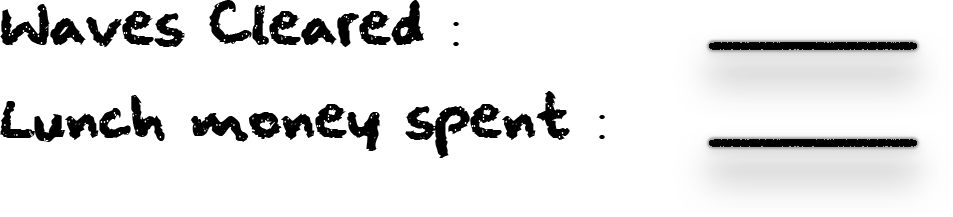
<style>
.page{position:relative;width:953px;height:217px;background:#ffffff}
.page>*{position:absolute;margin:0}
.t1{font:50px "squeakychalksound";color:#000000}
.t2{font:50px "TimesNewRomanPSMT";color:#000000}
</style>
<div class="page">
<p class="t1" style="left:0px;top:0px;width:459px;height:47px">Waves Cleared <span class="t2">:</span></p>
<p class="t1" style="left:0px;top:91px;width:605px;height:67px">Lunch money spent <span class="t2">:</span></p>
</div>
